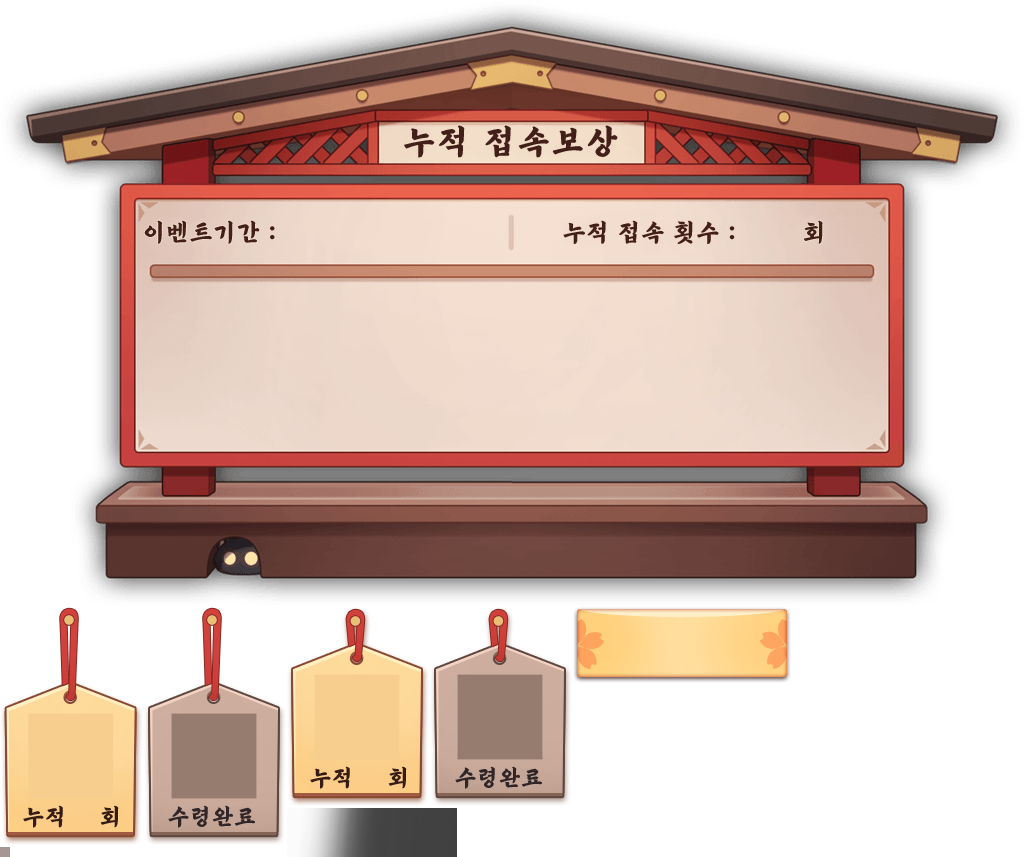
<style>
.page{position:relative;width:1024px;height:857px;background:#ffffff}
.page>*{position:absolute;margin:0}
.t1{font:34.7px "Dokrip";letter-spacing:0.08em;color:#421f18}
.t2{font:25px "Dokrip";letter-spacing:0.04em;color:#421f18}
.t3{font:23.6px "Dokrip";letter-spacing:0.04em;color:#351c16}
.t4{font:23.6px "Dokrip";letter-spacing:0.04em;color:#302628}
</style>
<div class="page">
<p class="t1" style="left:404px;top:125px;width:214px;height:33px">누적 접속보상</p>
<p class="t2" style="left:144px;top:220px;width:131px;height:24px">이벤트기간 :</p>
<p class="t2" style="left:563px;top:220px;width:172px;height:24px">누적 접속 횟수 :</p>
<p class="t2" style="left:803px;top:220px;width:20px;height:24px">회</p>
<p class="t3" style="left:310px;top:766px;width:40px;height:23px">누적</p>
<p class="t3" style="left:388px;top:766px;width:19px;height:23px">회</p>
<p class="t4" style="left:455px;top:766px;width:87px;height:23px">수령완료</p>
<p class="t3" style="left:23px;top:805px;width:40px;height:23px">누적</p>
<p class="t3" style="left:100px;top:805px;width:19px;height:23px">회</p>
<p class="t4" style="left:168px;top:805px;width:87px;height:23px">수령완료</p>
</div>
